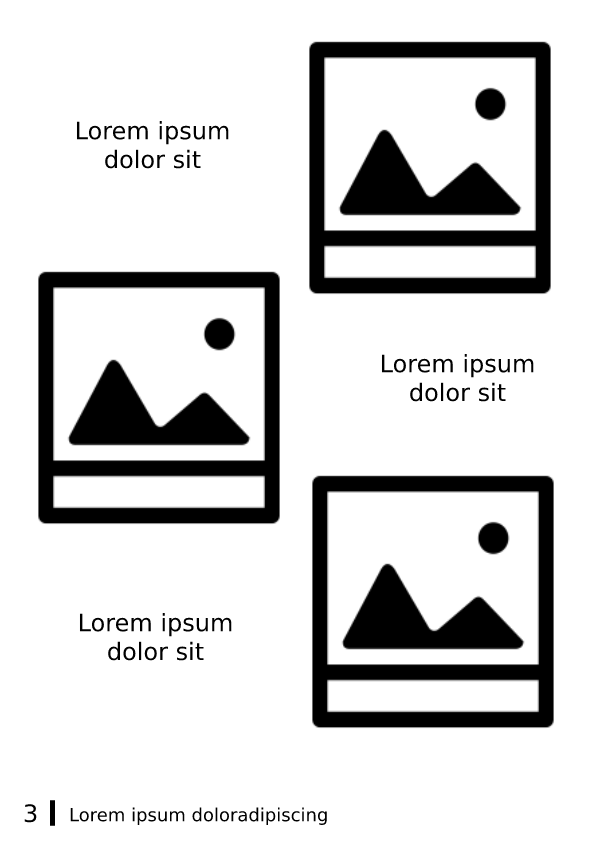
<style>
.page{position:relative;width:596px;height:842px;background:#ffffff}
.page>*{position:absolute;margin:0}
.t1{font:24px "DejaVuSans";color:#000000}
.t2{font:18px "DejaVuSans";color:#000000}
</style>
<div class="page">
<p class="t1" style="left:76px;top:121px;width:153px;height:48px;text-align:center">Lorem ipsum dolor sit <br>amet, consectetur adipiscing elit.</p>
<p class="t1" style="left:381px;top:354px;width:153px;height:48px;text-align:center">Lorem ipsum dolor sit <br>amet, consectetur adipiscing elit.</p>
<p class="t1" style="left:79px;top:613px;width:153px;height:48px;text-align:center">Lorem ipsum dolor sit <br>amet, consectetur adipiscing elit.</p>
<p class="t1" style="left:24px;top:804px;width:13px;height:19px">3</p>
<p class="t2" style="left:70px;top:807px;width:257px;height:18px">Lorem ipsum doloradipiscing</p>
</div>
